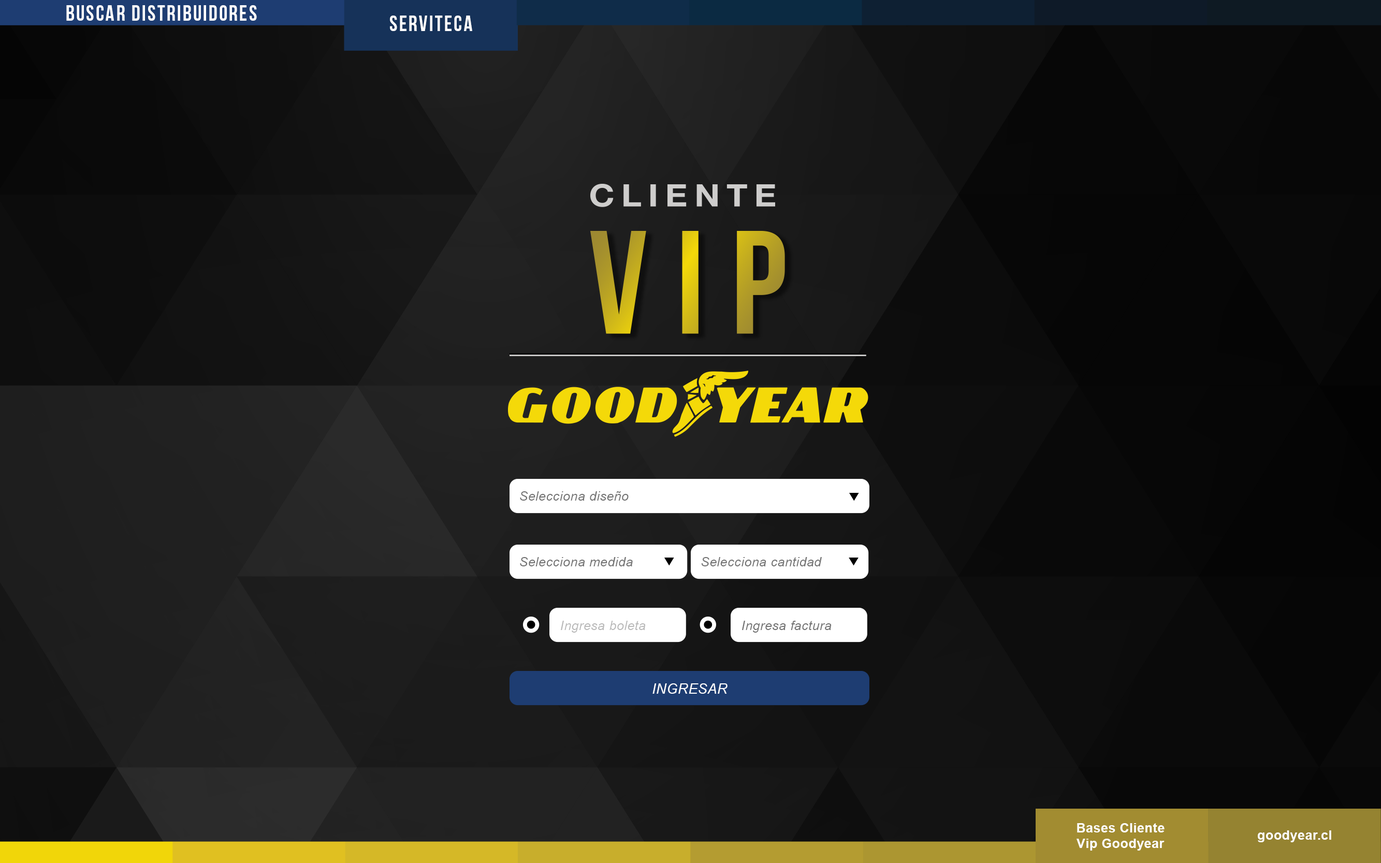
<style>
.page{position:relative;width:1381px;height:863px}
.page>*{position:absolute;margin:0}
.t1{font:21.6px "BebasNeue";letter-spacing:0.075em;color:#ffffff}
.t2{font:12.9px "Arial-ItalicMT";letter-spacing:0.025em;color:#737373}
.t3{font:12.9px "Arial-ItalicMT";letter-spacing:0.025em;color:#b9b9b9}
.t4{font:14px "Arial-ItalicMT";letter-spacing:0.025em;color:#ffffff;text-transform:uppercase}
.t5{font:12.9px "Arial-BoldMT";letter-spacing:0.025em;color:#ffffff}
</style>
<div class="page">
<p class="t1" style="left:66px;top:5px;width:191px;height:16px">BUSCAR DIStribuidores</p>
<p class="t1" style="left:390px;top:16px;width:82px;height:15px">SERVITECA</p>
<p class="t2" style="left:520px;top:491px;width:109px;height:10px">Selecciona diseño</p>
<p class="t2" style="left:520px;top:557px;width:113px;height:10px">Selecciona medida</p>
<p class="t2" style="left:701px;top:557px;width:121px;height:10px">Selecciona cantidad</p>
<p class="t3" style="left:561px;top:621px;width:85px;height:12px">Ingresa boleta</p>
<p class="t2" style="left:742px;top:621px;width:90px;height:12px">Ingresa factura</p>
<p class="t4" style="left:653px;top:684px;width:75px;height:10px">INGRESAR</p>
<p class="t5" style="left:1077px;top:823px;width:88px;height:28px;text-align:center">Bases Cliente<br>Vip Goodyear</p>
<p class="t5" style="left:1258px;top:831px;width:73px;height:12px">goodyear.cl</p>
</div>
